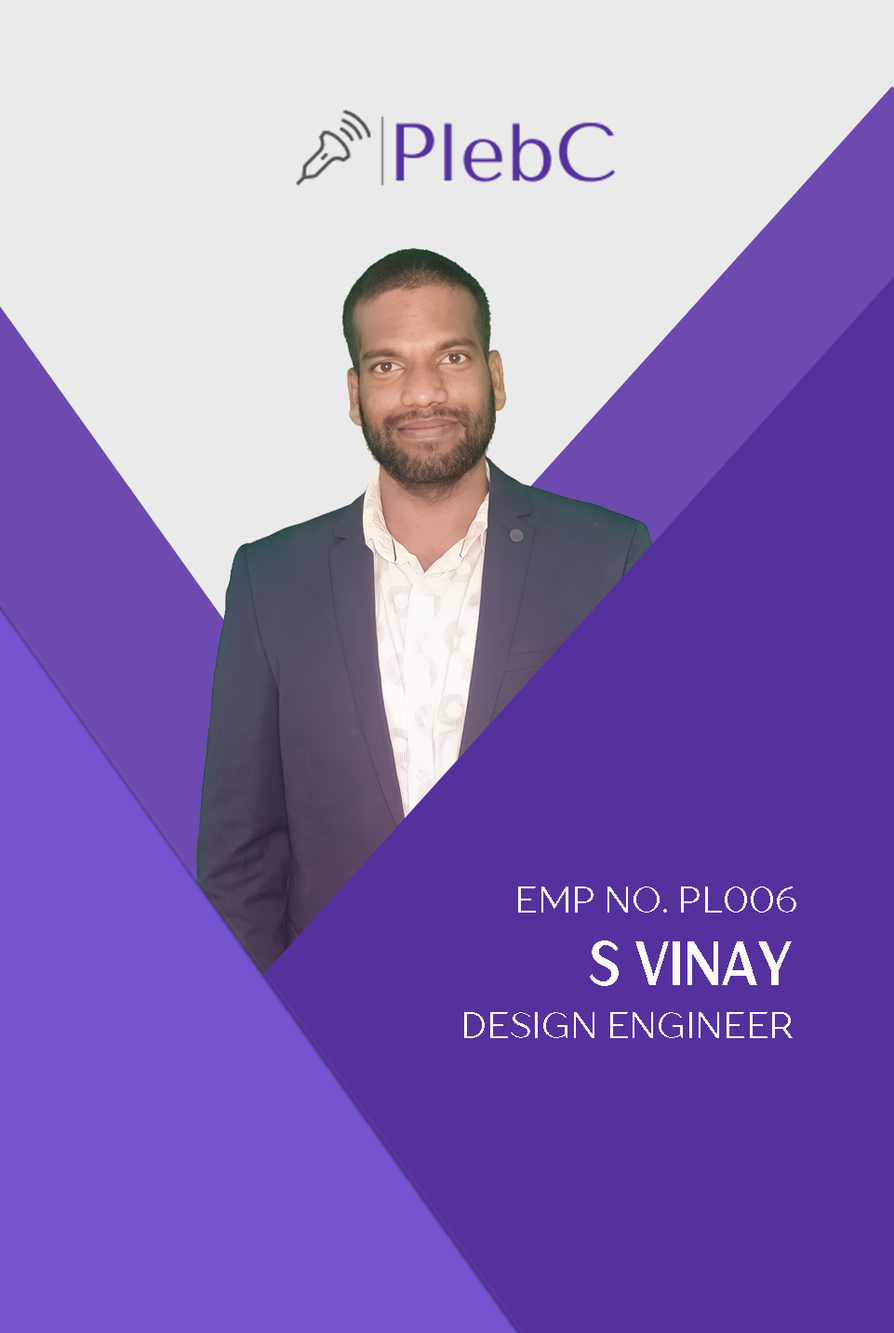
<style>
.page{position:relative;width:894px;height:1333px;background:#55319d}
.page>*{position:absolute;margin:0}
.t1{font:36.2px "TTDrugsTrial-Regular";color:#fffefd}
.t2{font:62px "TTDrugsTrial-Bold";color:#fbfaf7;scale:0.82 1}
.t3{font:36.2px "TTDrugsTrial-Regular";color:#fdfbf8}
</style>
<div class="page">
<p class="t1" style="left:518px;top:887px;width:279px;height:26px">EMP NO. PL006</p>
<p class="t2" style="left:590px;top:941px;width:202px;height:45px">S VINAY</p>
<p class="t3" style="left:464px;top:1012px;width:329px;height:26px">DESIGN ENGINEER</p>
</div>
